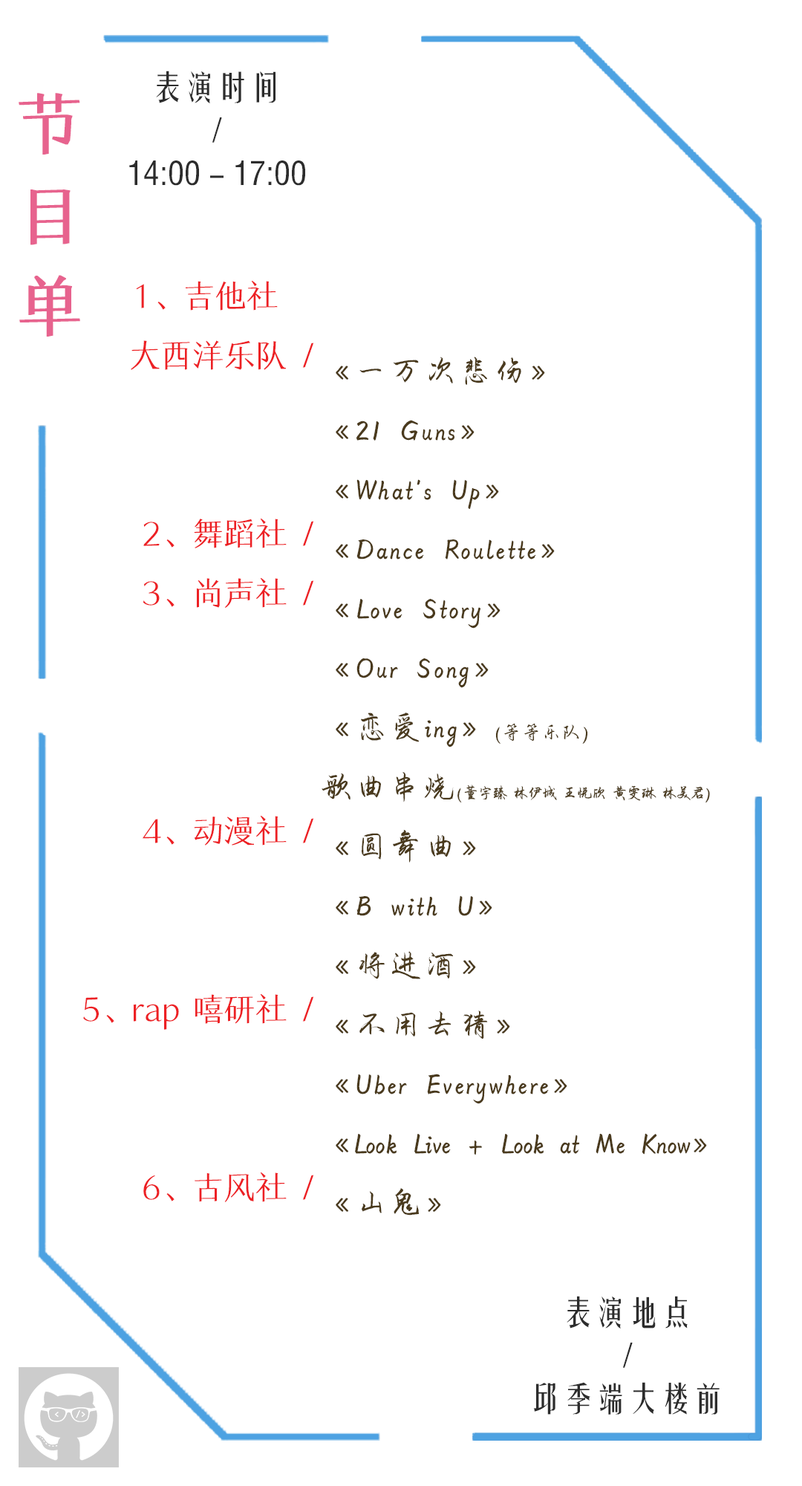
<style>
.page{position:relative;width:802px;height:1486px;background:#ffffff}
.page>*{position:absolute;margin:0}
.t1{font:32.7px/43.1px "FZYTK--GBK1-0";color:#2c2c2c}
.t2{font:65.4px/36.7px "HYYiSongW";letter-spacing:-0.02em;color:#e7638e;text-transform:uppercase;font-weight:bold}
.t3{font:31.7px/59.4px "HYYiSongW";color:#ed2024}
.t4{font:34.7px/59.4px "HYQingYunW";color:#4a3a1d}
.t5{font:19.8px/59.4px "HYQingYunW";color:#4a3a1d}
.t6{font:34.7px/59.4px "HYQingYunW";letter-spacing:-0.02em;color:#4a3a1d}
.t7{font:16.8px/59.4px "HYQingYunW";color:#4a3a1d}
.t8{font:16.8px/59.4px "HYQingYunW";letter-spacing:-0.14em;color:#4a3a1d}
.t9{font:34.7px/59.4px "HYQingYunW";letter-spacing:-0.06em;color:#4a3a1d}
</style>
<div class="page">
<p class="t1" style="left:129px;top:71px;width:176px;height:115px;text-align:center">表演时间<br>/<br>14:00 - 17:00</p>
<p class="t2" style="left:19px;top:93px;width:61px;height:244px;text-align:center">节 目 单</p>
<p class="t3" style="left:83px;top:280px;width:231px;height:922px;text-align:right">1、吉他社   <br>大西洋乐队 /<br><br><br>2、舞蹈社 /<br>3、尚声社 /<br><br><br><br>4、动漫社 /<br><br><br>5、rap 嘻研社 /<br><br><br>6、古风社 /</p>
<p class="t4" style="left:322px;top:357px;width:388px;height:859px">《一万次悲伤》<br>《21 Guns》<br>《What's Up》<br>《Dance Roulette》<br>《Love Story》<br>《Our Song》<br>《恋爱ing》<span class="t5">(等等乐队)<br></span><span class="t6">歌曲串烧</span><span class="t7">(</span><span class="t8">董宇臻 林伊城 王悦欣 黄雯琳 林美君</span><span class="t7">)</span><br>《圆舞曲》<br>《B with U》<br>《将进酒》<br>《不用去猜》<br>《Uber Everywhere》<br><span class="t9">《Look Live + Look at Me Know》</span><br>《山鬼》</p>
<p class="t1" style="left:533px;top:1296px;width:187px;height:119px;text-align:center">表演地点<br>/<br>邱季端大楼前</p>
</div>
